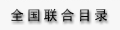
<style>
.page{position:relative;width:120px;height:30px;background:#f7f7f7}
.page>*{position:absolute;margin:0}
.t1{font:14px "SimHei";letter-spacing:0.2em;color:#000000}
</style>
<div class="page">
<p class="t1" style="left:11px;top:8px;width:96px;height:14px">全国联合目录</p>
</div>
